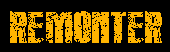
<style>
.page{position:relative;width:170px;height:52px;background:#000000}
.page>*{position:absolute;margin:0}
.t1{font:36.5px "Rock'sDeath";color:#ffb400;scale:0.96 1}
</style>
<div class="page">
<p class="t1" style="left:10px;top:11px;width:152px;height:32px">remonter</p>
</div>
